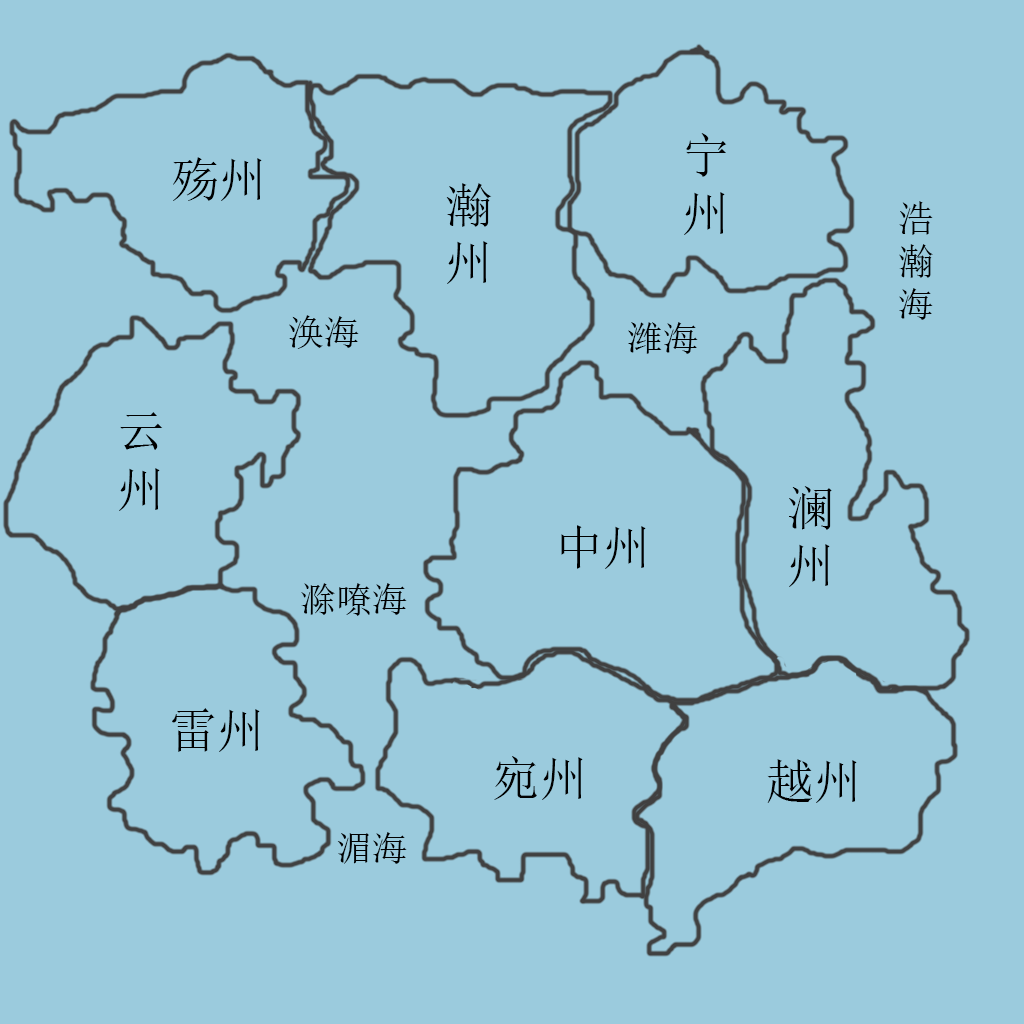
<style>
.page{position:relative;width:1024px;height:1024px;background:#9bcbdd}
.page>*{position:absolute;margin:0}
.t1{font:48px "SimSun";color:#010101}
.t2{font:48px "SimSun";color:#000000}
.t3{font:36px "SimSun";color:#000000}
.t4{font:36px "SimSun";color:#010101}
</style>
<div class="page">
<p class="t1" style="left:684px;top:133px;width:43px;height:102px">宁<br>州</p>
<p class="t2" style="left:173px;top:157px;width:89px;height:44px">殇州</p>
<p class="t2" style="left:446px;top:183px;width:46px;height:101px">瀚<br>州</p>
<p class="t3" style="left:899px;top:201px;width:34px;height:119px">浩<br>瀚<br>海</p>
<p class="t3" style="left:289px;top:315px;width:70px;height:34px">涣海</p>
<p class="t3" style="left:628px;top:322px;width:70px;height:32px">潍海</p>
<p class="t2" style="left:119px;top:412px;width:44px;height:99px">云<br>州</p>
<p class="t1" style="left:789px;top:486px;width:43px;height:101px">澜<br>州</p>
<p class="t2" style="left:561px;top:525px;width:85px;height:44px">中州</p>
<p class="t3" style="left:301px;top:583px;width:106px;height:33px">滁嘹海</p>
<p class="t2" style="left:172px;top:708px;width:88px;height:44px">雷州</p>
<p class="t1" style="left:494px;top:756px;width:89px;height:44px">宛州</p>
<p class="t2" style="left:767px;top:759px;width:90px;height:44px">越州</p>
<p class="t4" style="left:337px;top:832px;width:70px;height:32px">湄海</p>
</div>
